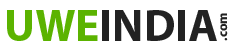
<style>
.page{position:relative;width:233px;height:49px;background:#ffffff}
.page>*{position:absolute;margin:0}
.t1{font:45.2px "MyriadHebrew-Bold";color:#5bb300}
.t2{font:45.2px "MyriadHebrew-Bold";color:#222222}
.t3{font:13.2px "MyriadHebrew-Bold";color:#222222}
</style>
<div class="page">
<p class="t1" style="left:7px;top:10px;width:91px;height:31px">UWE</p>
<p class="t2" style="left:102px;top:10px;width:115px;height:31px">INDIA</p>
<p class="t3" style="left:220px;top:13px;width:8px;height:28px;rotate:-90deg">.com</p>
</div>
